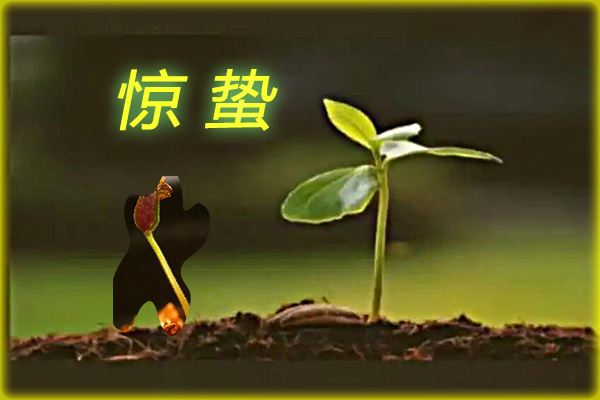
<style>
.page{position:relative;width:600px;height:400px}
.page>*{position:absolute;margin:0}
.t1{font:62.6px "MicrosoftYaHei";letter-spacing:0.3em;color:#faff2b;font-weight:bold;font-style:italic;scale:1.09 1}
</style>
<div class="page">
<p class="t1" style="left:117px;top:68px;width:161px;height:63px">惊蛰</p>
</div>
